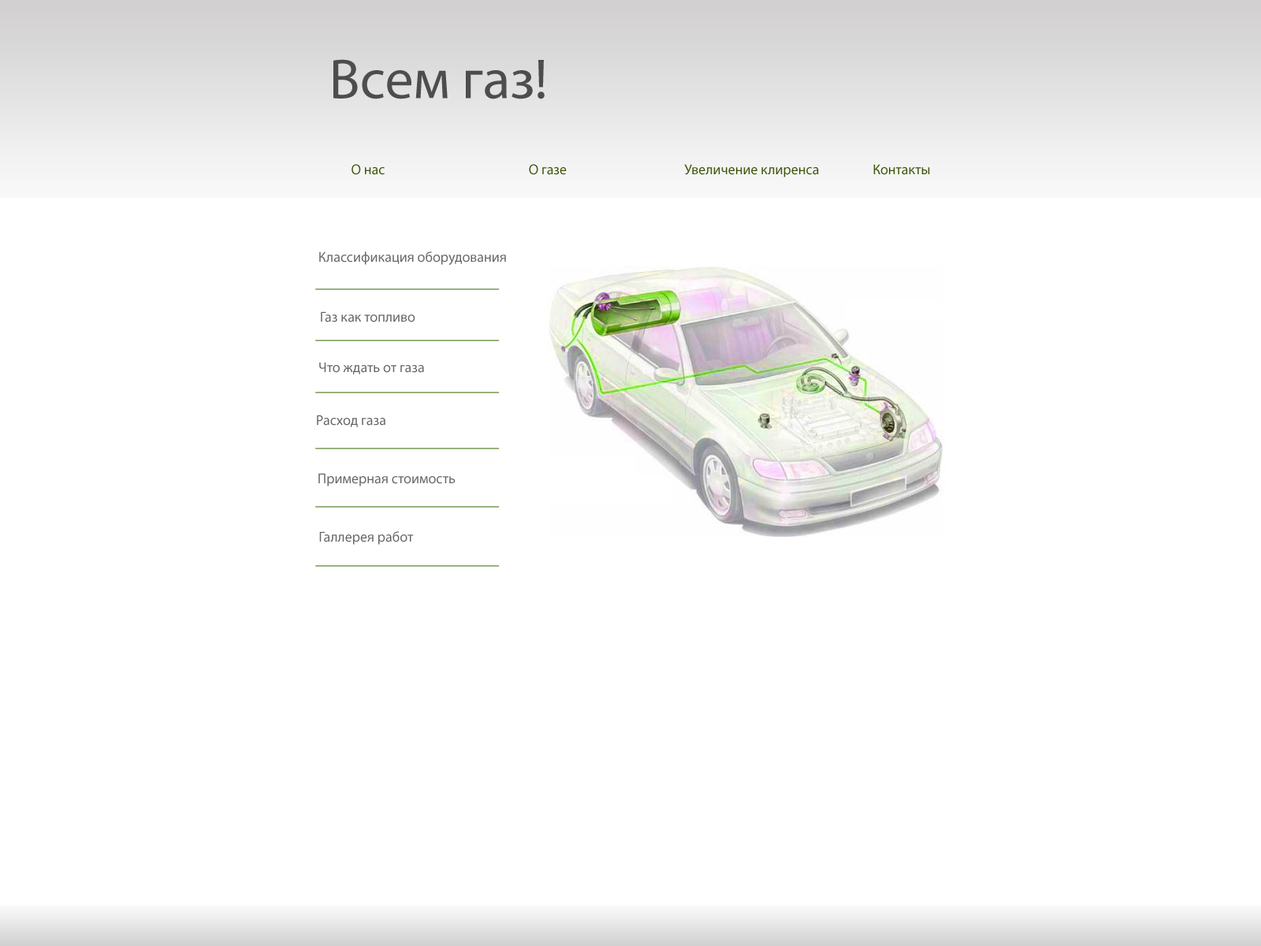
<style>
.page{position:relative;width:1261px;height:946px;background:#ffffff}
.page>*{position:absolute;margin:0}
.t1{font:56.7px "MyriadPro-Regular";color:#4d4d4d}
.t2{font:14.2px "MyriadPro-Regular";color:#3d550a}
.t3{font:14.2px "MyriadPro-Regular";color:#666666}
</style>
<div class="page">
<p class="t1" style="left:333px;top:59px;width:212px;height:40px">Всем газ!</p>
<p class="t2" style="left:351px;top:164px;width:34px;height:11px">О нас</p>
<p class="t2" style="left:529px;top:164px;width:38px;height:11px">О газе</p>
<p class="t2" style="left:684px;top:164px;width:135px;height:13px">Увеличение клиренса</p>
<p class="t2" style="left:873px;top:164px;width:57px;height:11px">Контакты</p>
<p class="t3" style="left:319px;top:251px;width:187px;height:14px">Классификация оборудования</p>
<p class="t3" style="left:321px;top:311px;width:94px;height:11px">Газ как топливо</p>
<p class="t3" style="left:319px;top:362px;width:105px;height:12px">Что ждать от газа</p>
<p class="t3" style="left:317px;top:415px;width:68px;height:12px">Расход газа</p>
<p class="t3" style="left:318px;top:473px;width:138px;height:13px">Примерная стоимость</p>
<p class="t3" style="left:319px;top:531px;width:95px;height:14px">Галлерея работ</p>
</div>
